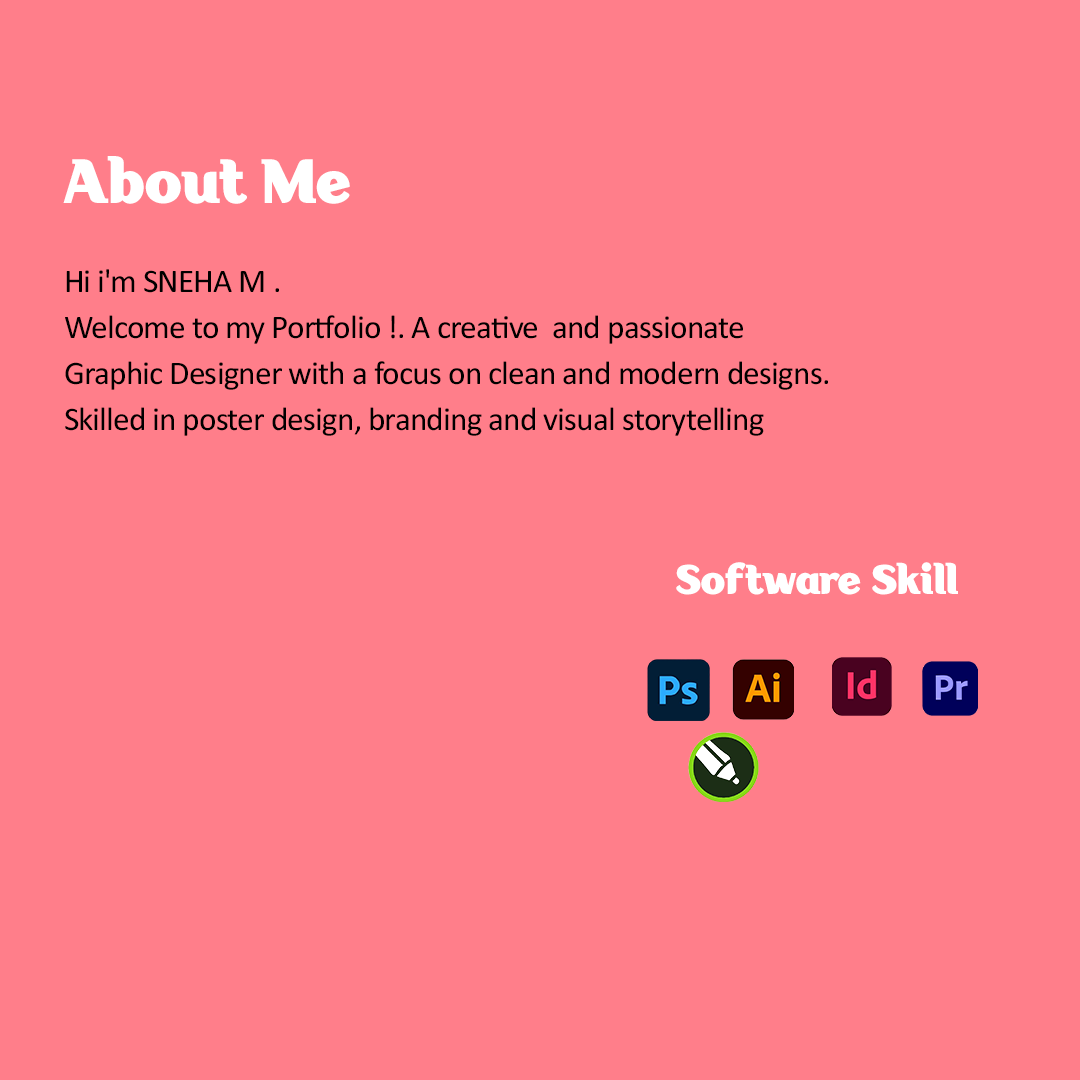
<style>
.page{position:relative;width:1080px;height:1080px;background:#ff7e8a}
.page>*{position:absolute;margin:0}
.t1{font:62.5px "AligarhArabicFREEPERSONALUSE-Black";letter-spacing:-0.025em;color:#ffffff}
.t2{font:33.3px/45.8px "Calibri";letter-spacing:-0.025em;color:#010000}
.t3{font:41.7px "AligarhArabicFREEPERSONALUSE-Black";letter-spacing:-0.025em;color:#ffffff}
</style>
<div class="page">
<p class="t1" style="left:63px;top:156px;width:287px;height:48px">About Me</p>
<p class="t2" style="left:65px;top:269px;width:763px;height:167px">Hi i'm SNEHA M .<br>Welcome to my Portfolio !. A creative  and passionate<br>Graphic Designer with a focus on clean and modern designs. <br>Skilled in poster design, branding and visual storytelling</p>
<p class="t3" style="left:676px;top:562px;width:282px;height:33px">Software Skill</p>
</div>
